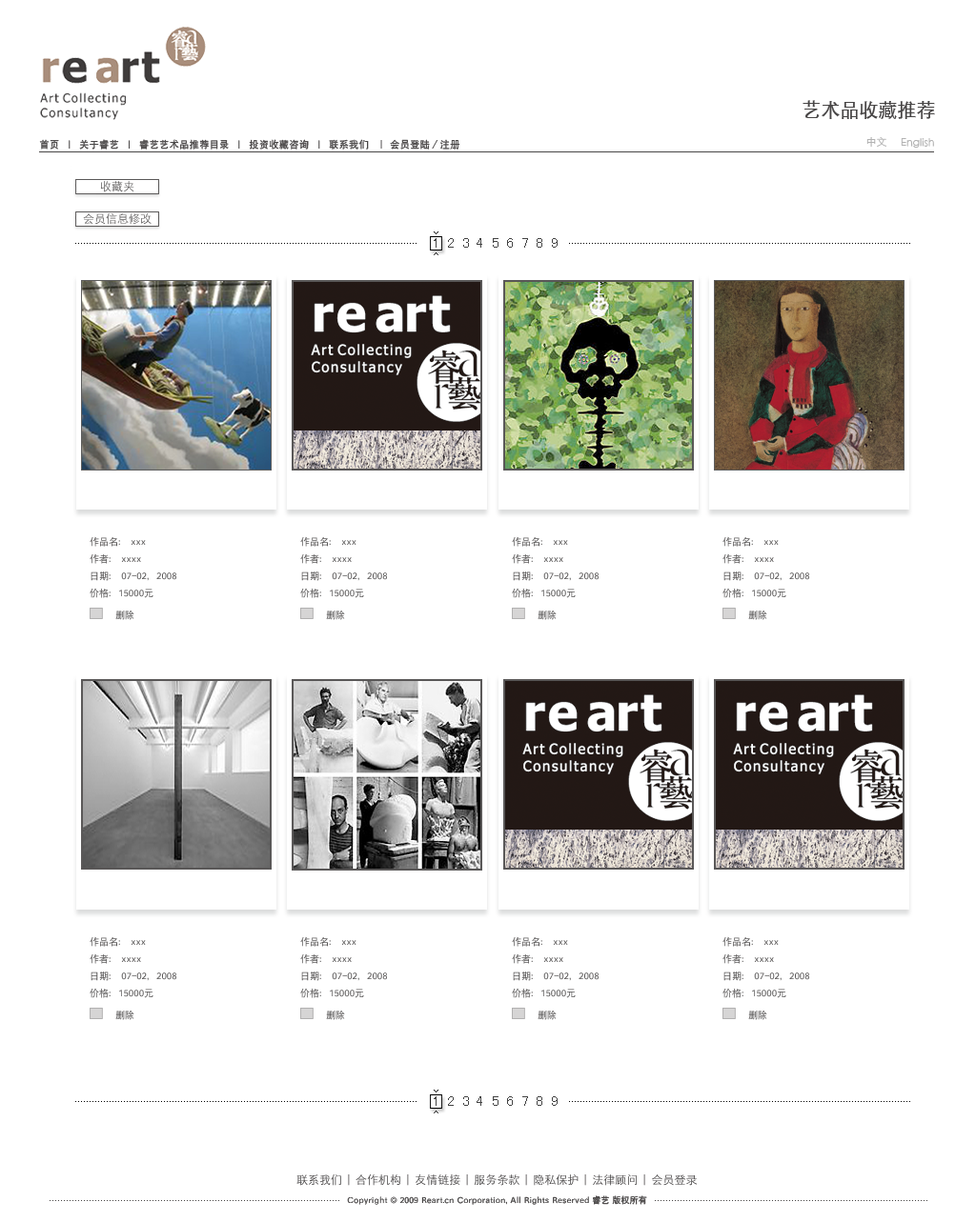
<style>
.page{position:relative;width:976px;height:1222px;background:#ffffff}
.page>*{position:absolute;margin:0}
.t1{font:11.4px "STXihei";color:#5a5858}
.t2{font:11.4px "STXihei"}
.t3{font:14.3px "SimHei";letter-spacing:0.5em;color:#434343}
.t4{font:9.5px/17.1px "SIL-Hei-Med-Jian";color:#5a5858}
.t5{font:9.5px "SIL-Hei-Med-Jian"}
</style>
<div class="page">
<p class="t1" style="left:100px;top:181px;width:34px;height:11px">收藏夹</p>
<p class="t2" style="left:83px;top:213px;width:68px;height:12px">会员信息修改</p>
<p class="t3" style="left:433px;top:238px;width:124px;height:10px">123456789</p>
<p class="t4" style="left:90px;top:536px;width:86px;height:62px">作品名： xxx <br>作者： xxxx<br>日期： 07-02，2008<br>价格：15000元</p>
<p class="t4" style="left:300px;top:536px;width:87px;height:62px">作品名： xxx <br>作者： xxxx<br>日期： 07-02，2008<br>价格：15000元</p>
<p class="t4" style="left:512px;top:536px;width:86px;height:62px">作品名： xxx <br>作者： xxxx<br>日期： 07-02，2008<br>价格：15000元</p>
<p class="t4" style="left:722px;top:536px;width:87px;height:62px">作品名： xxx <br>作者： xxxx<br>日期： 07-02，2008<br>价格：15000元</p>
<p class="t5" style="left:115px;top:610px;width:19px;height:10px">删除</p>
<p class="t5" style="left:326px;top:610px;width:19px;height:10px">删除</p>
<p class="t5" style="left:537px;top:610px;width:19px;height:10px">删除</p>
<p class="t5" style="left:748px;top:610px;width:19px;height:10px">删除</p>
<p class="t4" style="left:90px;top:936px;width:86px;height:62px">作品名： xxx <br>作者： xxxx<br>日期： 07-02，2008<br>价格：15000元</p>
<p class="t4" style="left:300px;top:936px;width:87px;height:62px">作品名： xxx <br>作者： xxxx<br>日期： 07-02，2008<br>价格：15000元</p>
<p class="t4" style="left:512px;top:936px;width:86px;height:62px">作品名： xxx <br>作者： xxxx<br>日期： 07-02，2008<br>价格：15000元</p>
<p class="t4" style="left:722px;top:936px;width:87px;height:62px">作品名： xxx <br>作者： xxxx<br>日期： 07-02，2008<br>价格：15000元</p>
<p class="t5" style="left:115px;top:1010px;width:19px;height:10px">删除</p>
<p class="t5" style="left:326px;top:1010px;width:19px;height:10px">删除</p>
<p class="t5" style="left:537px;top:1010px;width:19px;height:10px">删除</p>
<p class="t5" style="left:748px;top:1010px;width:19px;height:10px">删除</p>
<p class="t3" style="left:433px;top:1097px;width:124px;height:9px">123456789</p>
</div>
